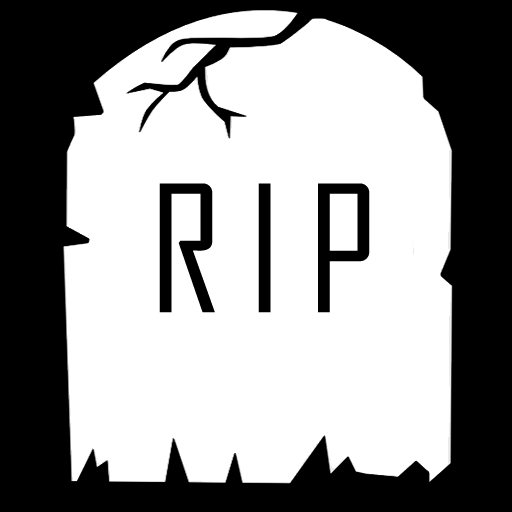
<style>
.page{position:relative;width:512px;height:512px;background:#ffffff}
.page>*{position:absolute;margin:0}
.t1{font:168px "AgencyFB-Reg";letter-spacing:0.158em;color:#000000}
</style>
<div class="page">
<p class="t1" style="left:159px;top:183px;width:211px;height:130px">RIP</p>
</div>
